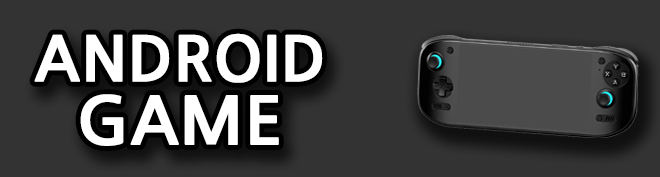
<style>
.page{position:relative;width:660px;height:177px;background:#333333}
.page>*{position:absolute;margin:0}
.t1{font:61.3px/60px "NanumGothicOTFBold";color:#ffffff;font-weight:bold}
.t2{font:65.2px/57.3px "NanumGothicOTFBold";color:#ffffff;font-weight:bold}
</style>
<div class="page">
<p class="t1" style="left:34px;top:33px;width:289px;height:113px;text-align:center">ANDROID<br><span class="t2">GAME</span></p>
</div>
